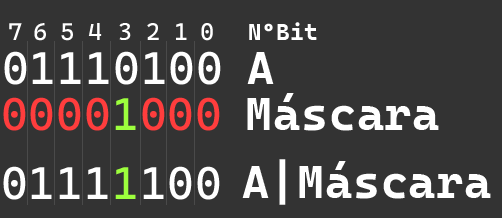
<style>
.page{position:relative;width:502px;height:218px;background:#333333}
.page>*{position:absolute;margin:0}
.t1{font:24.2px "CascadiaCode-Roman";letter-spacing:0.02em;color:#ffffff}
.t2{font:23.3px "CascadiaCodeRoman-Bold";letter-spacing:0.02em;color:#ffffff}
.t3{font:45.8px "CascadiaCode-Roman";letter-spacing:0.02em;color:#ffffff}
.t4{font:45.8px "CascadiaCodeRoman-Bold";letter-spacing:0.02em;color:#ffffff}
.t5{font:45.8px "CascadiaCode-Roman";letter-spacing:0.02em;color:#ff3d3d}
.t6{font:45.8px "CascadiaCode-Roman";letter-spacing:0.02em;color:#9dff3d}
</style>
<div class="page">
<p class="t1" style="left:9px;top:23px;width:13px;height:17px">7</p>
<p class="t1" style="left:34px;top:23px;width:12px;height:18px">6</p>
<p class="t1" style="left:61px;top:23px;width:12px;height:18px">5</p>
<p class="t1" style="left:88px;top:23px;width:14px;height:17px">4</p>
<p class="t1" style="left:119px;top:23px;width:12px;height:17px">3</p>
<p class="t1" style="left:147px;top:23px;width:12px;height:17px">2</p>
<p class="t1" style="left:176px;top:23px;width:11px;height:17px">1</p>
<p class="t1" style="left:201px;top:23px;width:12px;height:18px">0</p>
<p class="t2" style="left:249px;top:22px;width:68px;height:18px">NºBit</p>
<p class="t3" style="left:4px;top:51px;width:217px;height:34px">01110100</p>
<p class="t4" style="left:247px;top:52px;width:27px;height:32px">A</p>
<p class="t5" style="left:3px;top:97px;width:217px;height:34px">0000<span class="t6">1</span>000</p>
<p class="t4" style="left:247px;top:93px;width:192px;height:38px">Máscara</p>
<p class="t4" style="left:242px;top:159px;width:249px;height:46px">A|Máscara</p>
<p class="t3" style="left:3px;top:166px;width:217px;height:34px">0111<span class="t6">1</span>100</p>
</div>
